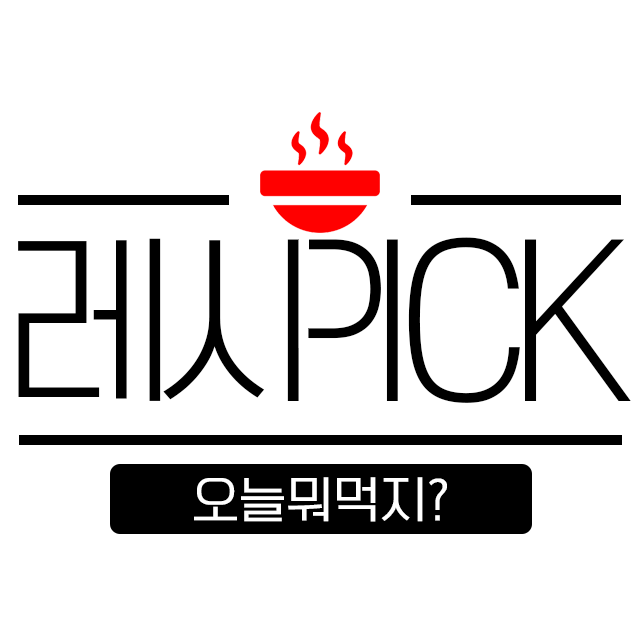
<style>
.page{position:relative;width:640px;height:640px;background:#ffffff}
.page>*{position:absolute;margin:0}
.t1{font:180px "TTOmniGothicL";letter-spacing:-0.125em;color:#000000}
.t2{font:190px "TTOmniGothicL";letter-spacing:-0.1em;color:#000000}
.t3{font:48px "TTOmniGothicM";color:#ffffff}
</style>
<div class="page">
<p class="t1" style="left:18px;top:238px;width:293px;height:163px">레시</p>
<p class="t2" style="left:287px;top:237px;width:344px;height:166px">PICK</p>
<p class="t3" style="left:194px;top:477px;width:253px;height:45px">오늘뭐먹지?</p>
</div>
